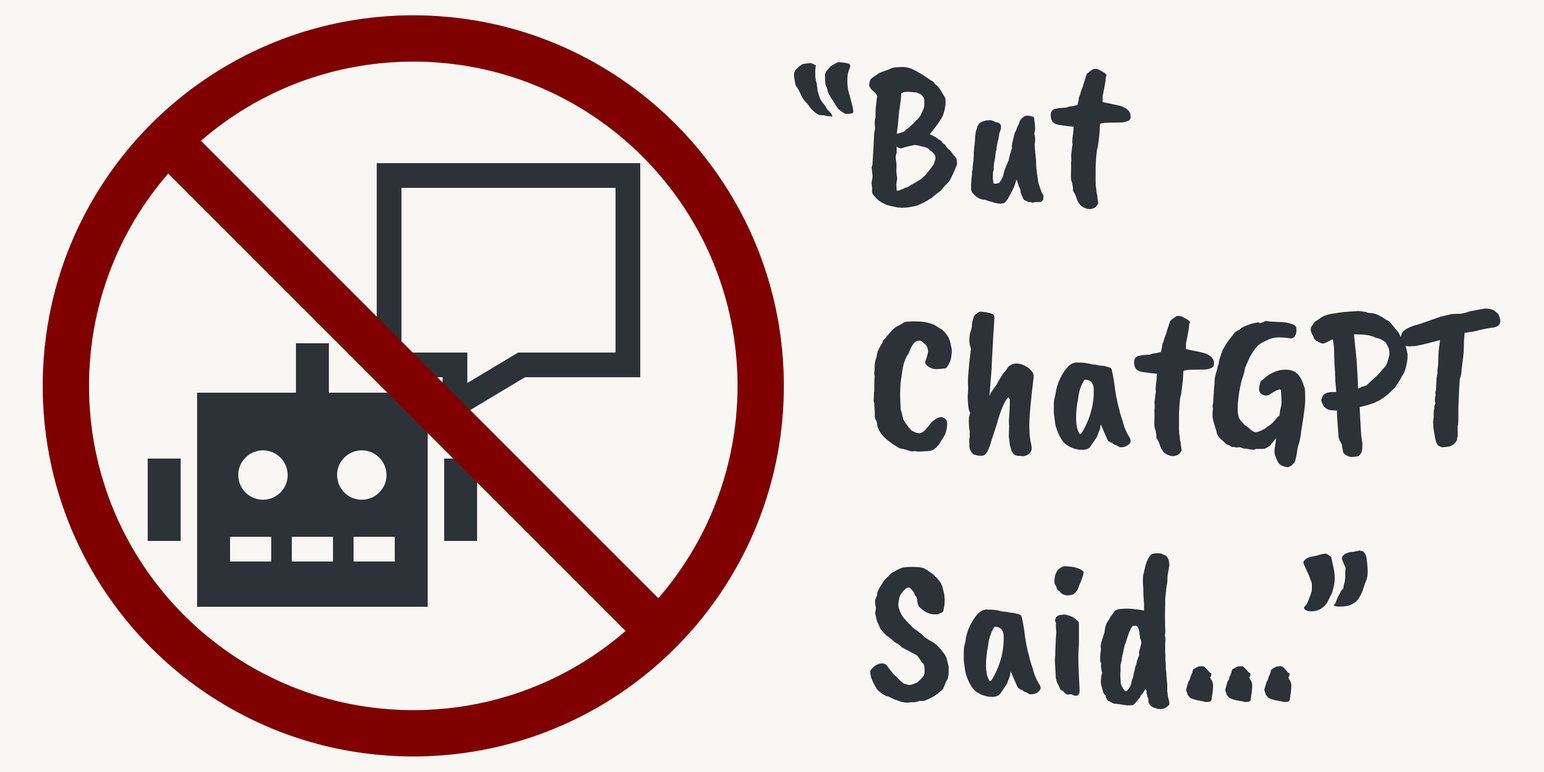
<style>
.page{position:relative;width:1544px;height:772px;background:#f8f7f4}
.page>*{position:absolute;margin:0}
.t1{font:205.9px "CaveatBrush-Regular";color:#2d3138}
</style>
<div class="page">
<p class="t1" style="left:794px;top:62px;width:707px;height:647px">“But<br>  ChatGPT<br>  Said…”</p>
</div>
